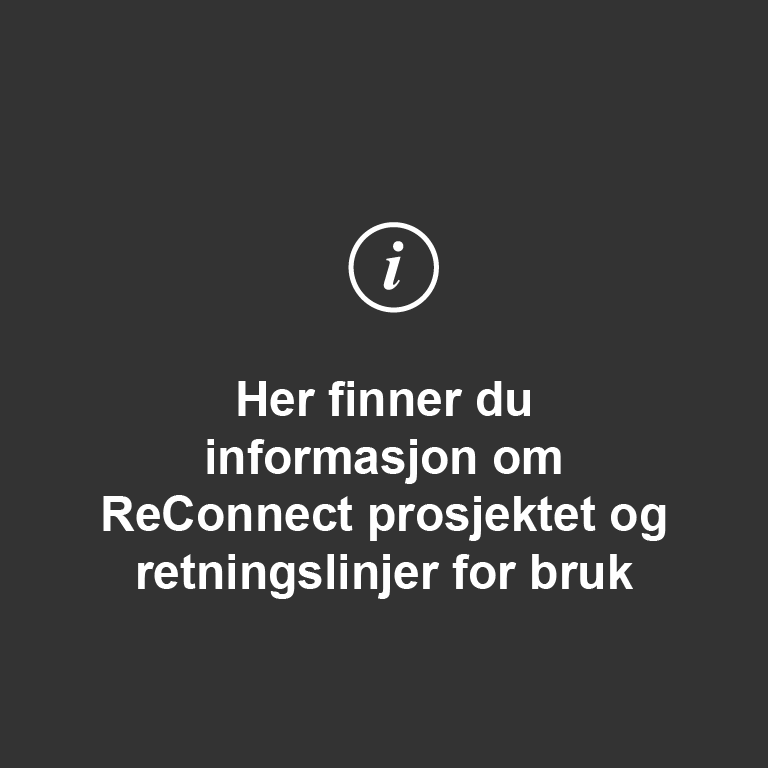
<style>
.page{position:relative;width:768px;height:768px;background:#333333}
.page>*{position:absolute;margin:0}
.t1{font:48px "Arial-BoldMT";color:#ffffff}
</style>
<div class="page">
<p class="t1" style="left:103px;top:381px;width:563px;height:218px;text-align:center">Her finner du <br>informasjon om <br>ReConnect prosjektet og <br>retningslinjer for bruk</p>
</div>
